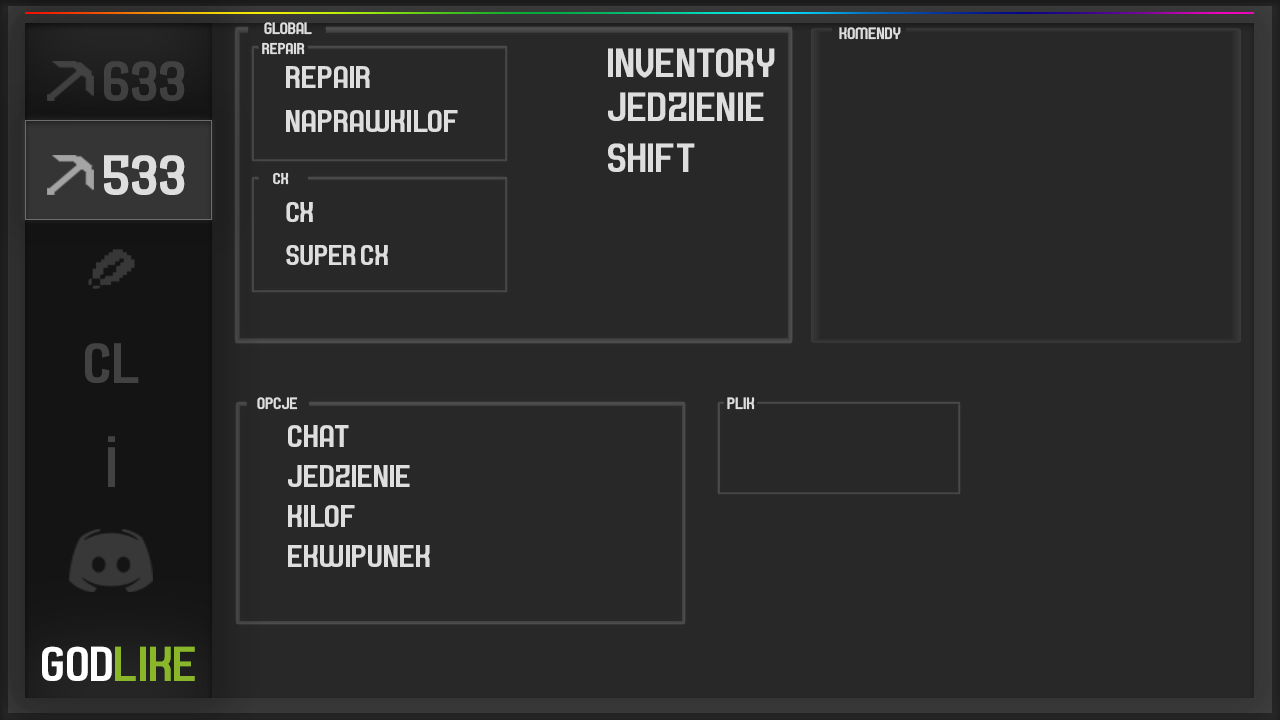
<style>
.page{position:relative;width:1280px;height:720px;background:#282828}
.page>*{position:absolute;margin:0}
.t1{font:16.7px "Septacharge";color:#dedede}
.t2{font:15.9px "Septacharge";color:#dedede}
.t3{font:41.7px "Septacharge";color:#dedede}
.t4{font:58.3px "Septacharge";color:#424242}
.t5{font:31.9px "Septacharge";color:#dedede}
.t6{font:58.3px "Septacharge";color:#dedede}
.t7{font:29.2px "Septacharge";color:#dedede}
.t8{font:50px "Septacharge";color:#8ab62a}
.t9{font:50px "Septacharge";color:#ffffff}
</style>
<div class="page">
<p class="t1" style="left:264px;top:22px;width:48px;height:13px">GLOBAL</p>
<p class="t1" style="left:839px;top:27px;width:62px;height:13px">KOMENDY</p>
<p class="t2" style="left:262px;top:42px;width:43px;height:13px">REPAIR</p>
<p class="t3" style="left:608px;top:48px;width:167px;height:30px">INVENTORY</p>
<p class="t4" style="left:104px;top:61px;width:81px;height:40px">633</p>
<p class="t5" style="left:286px;top:66px;width:84px;height:22px">REPAIR</p>
<p class="t3" style="left:608px;top:92px;width:156px;height:29px">JEDZIENIE</p>
<p class="t5" style="left:286px;top:110px;width:172px;height:22px">NAPRAWKILOF</p>
<p class="t3" style="left:608px;top:143px;width:87px;height:29px">SHIFT</p>
<p class="t6" style="left:104px;top:155px;width:81px;height:40px">533</p>
<p class="t2" style="left:273px;top:172px;width:16px;height:13px">CX</p>
<p class="t7" style="left:286px;top:202px;width:27px;height:20px">CX</p>
<p class="t7" style="left:286px;top:245px;width:102px;height:20px">SUPER CX</p>
<p class="t4" style="left:85px;top:343px;width:54px;height:40px">CL</p>
<p class="t1" style="left:257px;top:397px;width:41px;height:13px">OPCJE</p>
<p class="t1" style="left:727px;top:397px;width:28px;height:13px">PLIK</p>
<p class="t5" style="left:288px;top:425px;width:61px;height:22px">CHAT</p>
<p class="t4" style="left:108px;top:436px;width:7px;height:6px">.</p>
<p class="t5" style="left:288px;top:465px;width:122px;height:22px">JEDZIENIE</p>
<p class="t5" style="left:288px;top:505px;width:67px;height:22px">KILOF</p>
<p class="t5" style="left:288px;top:545px;width:142px;height:22px">EKWIPUNEK</p>
<p class="t8" style="left:42px;top:646px;width:153px;height:35px"><span class="t9">GOD</span>LIKE</p>
</div>
